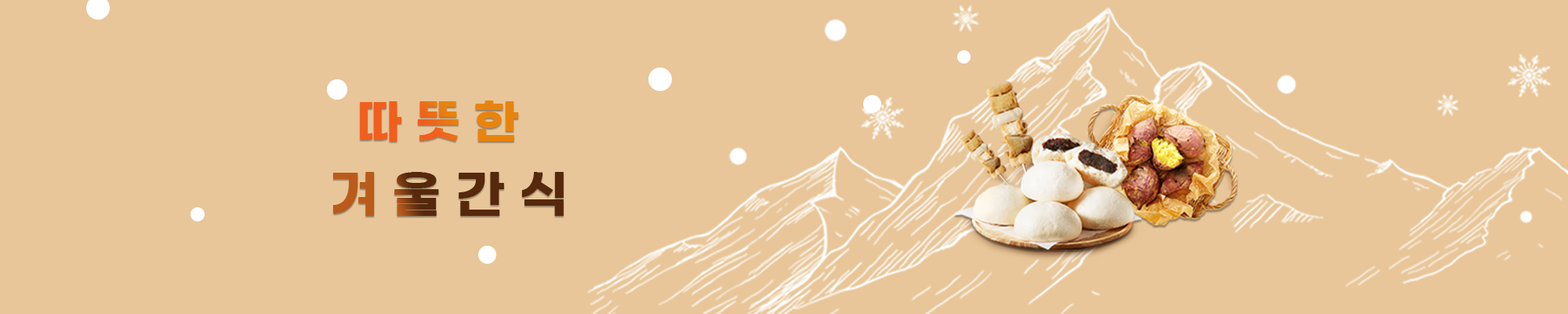
<style>
.page{position:relative;width:1568px;height:314px;background:#e8c699}
.page>*{position:absolute;margin:0}
.t1{font:47px "GmarketSansTTFBold"}
.t2{font:51px "GmarketSansTTFBold"}
</style>
<div class="page">
<p class="t1" style="left:360px;top:100px;width:159px;height:41px">따 뜻 한</p>
<p class="t2" style="left:333px;top:172px;width:231px;height:44px">겨 울 간 식</p>
</div>
